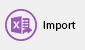
<style>
.page{position:relative;width:85px;height:50px;background:#f0f0f0}
.page>*{position:absolute;margin:0}
.t1{font:11px "MyriadPro-Regular";color:#000000}
</style>
<div class="page">
<p class="t1" style="left:43px;top:21px;width:33px;height:10px">Import</p>
</div>
